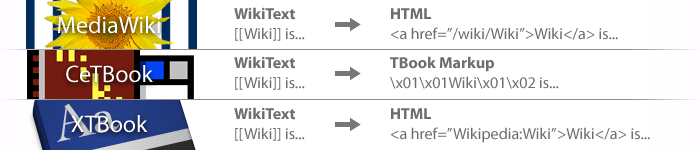
<style>
.page{position:relative;width:700px;height:150px;background:#ffffff}
.page>*{position:absolute;margin:0}
.t1{font:24px "MyriadPro-Regular";color:#ffffff}
.t2{font:16px/20px "MyriadPro-Regular";color:#6f6f6f}
.t3{font:16px/20px "MyriadPro-Bold";color:#6e6e6e}
</style>
<div class="page">
<p class="t1" style="left:58px;top:16px;width:102px;height:18px">MediaWiki</p>
<p class="t2" style="left:234px;top:7px;width:71px;height:34px"><span class="t3">WikiText<br></span>[[Wiki]] is...</p>
<p class="t2" style="left:391px;top:8px;width:227px;height:32px"><span class="t3">HTML<br></span>&lt;a href=”/wiki/Wiki”&gt;Wiki&lt;/a&gt; is...</p>
<p class="t1" style="left:66px;top:65px;width:87px;height:18px">CeTBook</p>
<p class="t2" style="left:234px;top:56px;width:71px;height:34px"><span class="t3">WikiText<br></span>[[Wiki]] is...</p>
<p class="t2" style="left:390px;top:56px;width:169px;height:33px"><span class="t3">TBook Markup<br></span>\x01\x01Wiki\x01\x02 is...</p>
<p class="t2" style="left:234px;top:107px;width:71px;height:34px"><span class="t3">WikiText<br></span>[[Wiki]] is...</p>
<p class="t2" style="left:391px;top:108px;width:259px;height:35px"><span class="t3">HTML<br></span>&lt;a href=”Wikipedia:Wiki”&gt;Wiki&lt;/a&gt; is...</p>
<p class="t1" style="left:71px;top:115px;width:77px;height:18px">XTBook</p>
</div>
